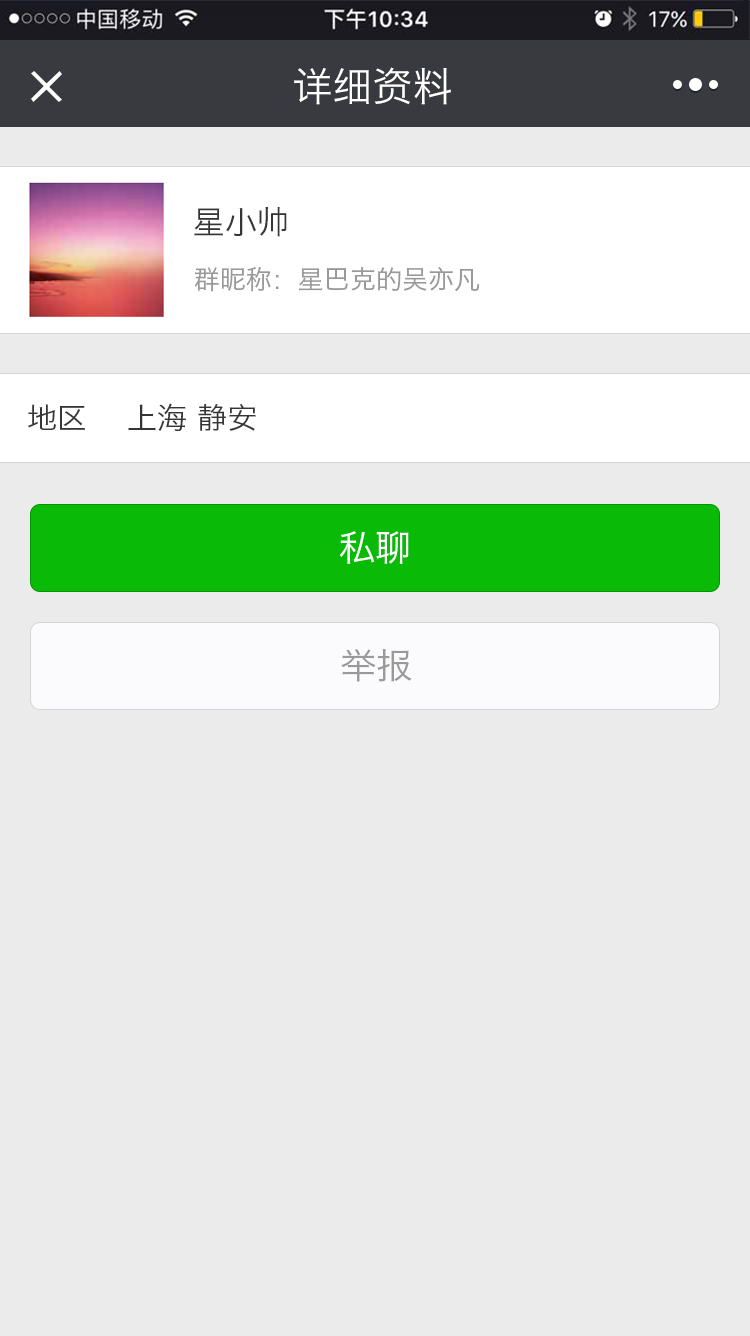
<style>
.page{position:relative;width:750px;height:1336px;background:#ebebeb}
.page>*{position:absolute;margin:0}
.t1{font:40px "HiraginoSansGB-W3";color:#ffffff}
.t2{font:32px "HiraginoSansGB-W3";color:#353535}
.t3{font:26px "HiraginoSansGB-W3";color:#999999}
.t4{font:30px "HiraginoSansGB-W3";color:#353535}
.t5{font:36px "HiraginoSansGB-W3";color:#ffffff}
.t6{font:36px "HiraginoSansGB-W3";color:#999999}
</style>
<div class="page">
<p class="t1" style="left:294px;top:67px;width:157px;height:38px">详细资料</p>
<p class="t2" style="left:194px;top:207px;width:93px;height:30px">星小帅</p>
<p class="t3" style="left:194px;top:266px;width:286px;height:26px">群昵称：星巴克的吴亦凡</p>
<p class="t4" style="left:28px;top:403px;width:228px;height:28px">地区    上海 静安</p>
<p class="t5" style="left:340px;top:531px;width:69px;height:33px">私聊</p>
<p class="t6" style="left:341px;top:649px;width:71px;height:33px">举报</p>
</div>
